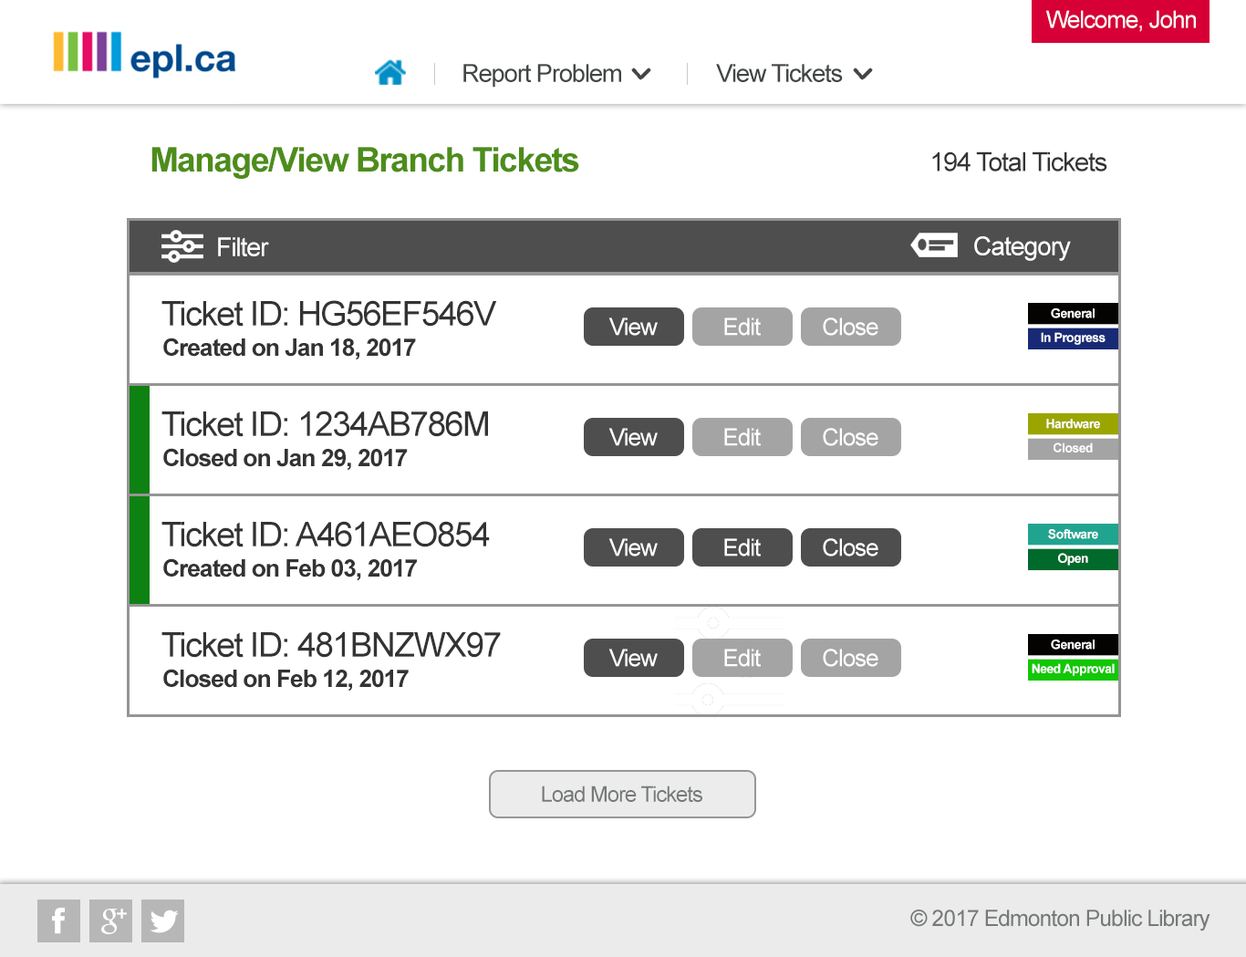
<style>
.page{position:relative;width:1246px;height:957px;background:#ffffff}
.page>*{position:absolute;margin:0}
.t1{font:23.7px "ArialMT";letter-spacing:-0.04em;color:#ffffff}
.t2{font:24.9px "ArialMT";letter-spacing:-0.04em;color:#414546}
.t3{font:33.9px "Arial-BoldMT";letter-spacing:-0.04em;color:#4d8d1a}
.t4{font:26.2px "ArialMT";letter-spacing:-0.04em;color:#333333}
.t5{font:25.9px "ArialMT";letter-spacing:-0.04em;color:#ffffff}
.t6{font:33.9px "ArialMT";letter-spacing:-0.04em;color:#333333}
.t7{font:12.8px "Arial-BoldMT";letter-spacing:-0.04em;color:#ffffff}
.t8{font:24.2px "Arial-BoldMT";letter-spacing:-0.04em;color:#333333}
.t9{font:21.6px "ArialMT";letter-spacing:-0.04em;color:#767979}
.t10{font:22.6px "ArialMT";letter-spacing:-0.04em;color:#767979}
</style>
<div class="page">
<p class="t1" style="left:1046px;top:10px;width:150px;height:22px">Welcome, John</p>
<p class="t2" style="left:463px;top:64px;width:158px;height:24px">Report Problem</p>
<p class="t2" style="left:716px;top:64px;width:127px;height:18px">View Tickets</p>
<p class="t3" style="left:151px;top:147px;width:428px;height:32px">Manage/View Branch Tickets</p>
<p class="t4" style="left:932px;top:151px;width:175px;height:20px">194 Total Tickets</p>
<p class="t5" style="left:218px;top:237px;width:51px;height:19px">Filter</p>
<p class="t5" style="left:974px;top:236px;width:97px;height:25px">Category</p>
<p class="t6" style="left:161px;top:300px;width:336px;height:27px">Ticket ID: HG56EF546V</p>
<p class="t1" style="left:608px;top:317px;width:50px;height:19px">View</p>
<p class="t1" style="left:724px;top:317px;width:37px;height:19px">Edit</p>
<p class="t1" style="left:823px;top:317px;width:55px;height:19px">Close</p>
<p class="t7" style="left:1051px;top:308px;width:44px;height:10px">General</p>
<p class="t8" style="left:163px;top:338px;width:253px;height:22px">Created on Jan 18, 2017</p>
<p class="t7" style="left:1041px;top:332px;width:65px;height:13px">In Progress</p>
<p class="t6" style="left:161px;top:411px;width:327px;height:26px">Ticket ID: 1234AB786M</p>
<p class="t7" style="left:1046px;top:419px;width:54px;height:10px">Hardware</p>
<p class="t1" style="left:608px;top:428px;width:50px;height:18px">View</p>
<p class="t1" style="left:724px;top:428px;width:37px;height:18px">Edit</p>
<p class="t1" style="left:823px;top:428px;width:55px;height:18px">Close</p>
<p class="t8" style="left:163px;top:448px;width:245px;height:23px">Closed on Jan 29, 2017</p>
<p class="t7" style="left:1054px;top:442px;width:39px;height:10px">Closed</p>
<p class="t6" style="left:161px;top:521px;width:329px;height:26px">Ticket ID: A461AEO854</p>
<p class="t7" style="left:1048px;top:529px;width:50px;height:10px">Software</p>
<p class="t1" style="left:608px;top:538px;width:50px;height:18px">View</p>
<p class="t1" style="left:724px;top:538px;width:37px;height:18px">Edit</p>
<p class="t1" style="left:823px;top:538px;width:55px;height:18px">Close</p>
<p class="t7" style="left:1058px;top:553px;width:30px;height:13px">Open</p>
<p class="t8" style="left:163px;top:558px;width:254px;height:23px">Created on Feb 03, 2017</p>
<p class="t6" style="left:161px;top:631px;width:340px;height:27px">Ticket ID: 481BNZWX97</p>
<p class="t7" style="left:1051px;top:639px;width:44px;height:11px">General</p>
<p class="t1" style="left:608px;top:649px;width:50px;height:18px">View</p>
<p class="t1" style="left:724px;top:649px;width:37px;height:18px">Edit</p>
<p class="t1" style="left:823px;top:649px;width:55px;height:18px">Close</p>
<p class="t7" style="left:1032px;top:663px;width:83px;height:13px">Need Approval</p>
<p class="t8" style="left:163px;top:669px;width:246px;height:22px">Closed on Feb 12, 2017</p>
<p class="t9" style="left:542px;top:785px;width:160px;height:17px">Load More Tickets</p>
<p class="t10" style="left:910px;top:909px;width:301px;height:22px">© 2017 Edmonton Public Library</p>
</div>
